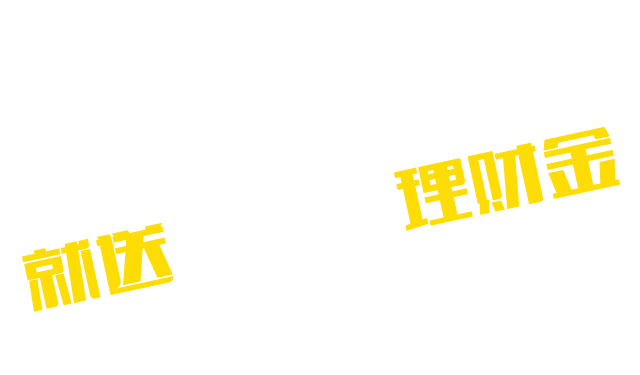
<style>
.page{position:relative;width:640px;height:375px;background:#ffffff}
.page>*{position:absolute;margin:0}
.t1{font:80.6px "FZCTHJW--GB1-0";color:#fddd05;scale:0.94 1}
</style>
<div class="page">
<p class="t1" style="left:22px;top:126px;width:598px;height:186px;rotate:-12deg">就送           理财金</p>
</div>
